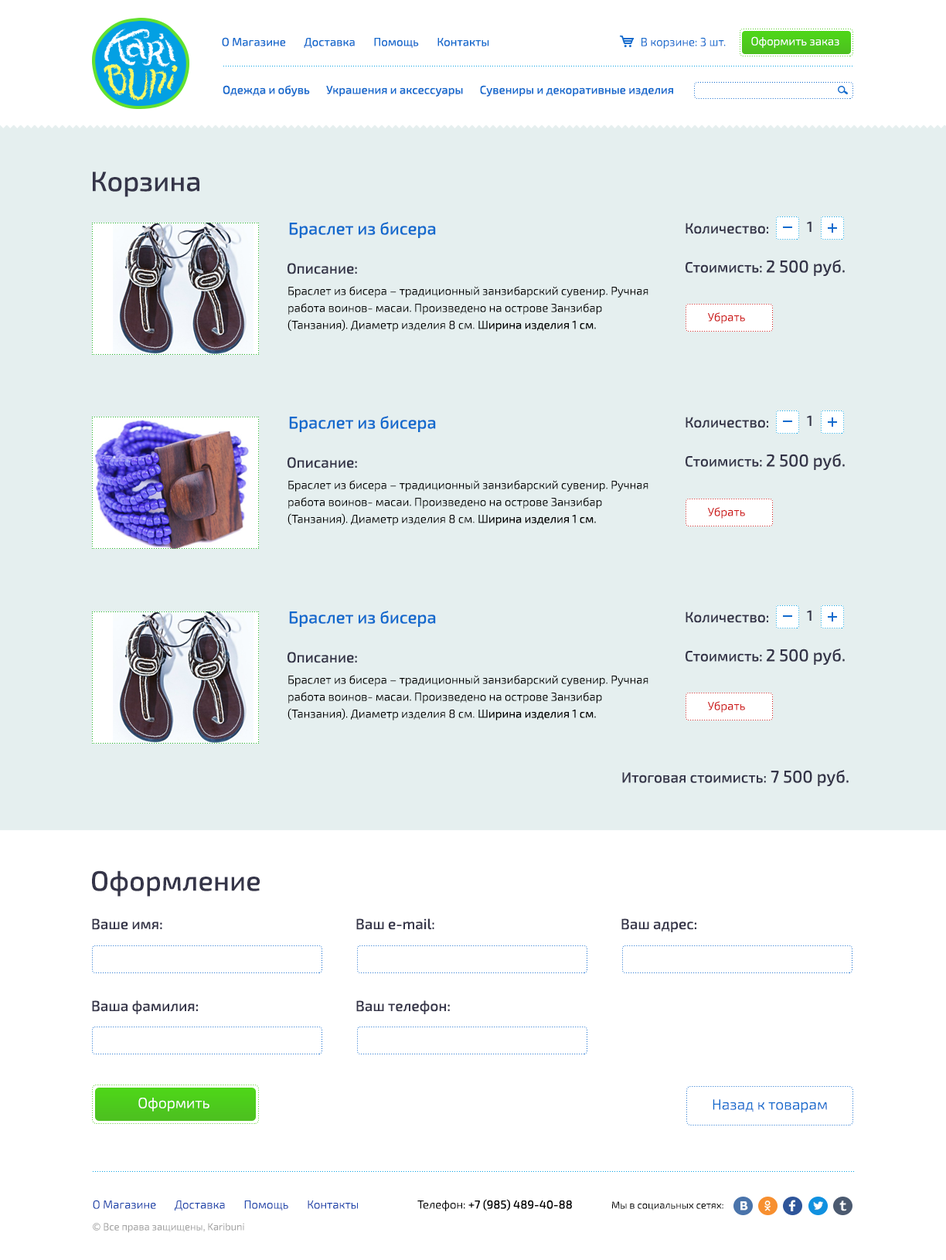
<style>
.page{position:relative;width:946px;height:1260px;background:#ffffff}
.page>*{position:absolute;margin:0}
.t1{font:11.6px "Exo2-Regular";color:#126acd}
.t2{font:11.6px "Exo2-Light";color:#126acd}
.t3{font:11.6px "Exo2-Light";color:#ffffff}
.t4{font:11.6px "Exo2-Medium";color:#126acd}
.t5{font:27.8px "Exo2-Medium";color:#353549}
.t6{font:17px "Exo2-Medium";color:#126acd}
.t7{font:14.7px "Exo2-Medium";color:#353549}
.t8{font:17px "Exo2-Medium";color:#353549}
.t9{font:11.6px/17px "Exo2-Light";color:#000000}
.t10{font:11.6px/17px "Exo2-Regular";color:#000000}
.t11{font:11.6px "Exo2-Light";color:#cd1212}
.t12{font:14.7px "Exo2-Light";color:#ffffff}
.t13{font:14.7px "Exo2-Light";color:#126acd}
.t14{font:11.6px "Exo2-Light";color:#1e45ab}
.t15{font:11.6px "Exo2-Medium";color:#000000}
.t16{font:11.6px "Exo2-Light";color:#000000}
.t17{font:10.1px "Exo2-Light";color:#000000}
.t18{font:10.1px "Exo2-Light";color:#a3a3a3}
</style>
<div class="page">
<p class="t1" style="left:222px;top:37px;width:267px;height:11px">О Магазине       Доставка       Помощь       Контакты</p>
<p class="t2" style="left:642px;top:37px;width:84px;height:12px">В корзине: 3 шт.</p>
<p class="t3" style="left:751px;top:36px;width:89px;height:12px">Оформить заказ</p>
<p class="t4" style="left:223px;top:85px;width:450px;height:12px">Одежда и обувь       Украшения и аксессуары       Сувениры и декоративные изделия</p>
<p class="t5" style="left:93px;top:172px;width:106px;height:25px">Корзина</p>
<p class="t6" style="left:289px;top:222px;width:147px;height:16px">Браслет из бисера</p>
<p class="t7" style="left:807px;top:221px;width:5px;height:11px">1</p>
<p class="t7" style="left:686px;top:223px;width:82px;height:11px">Количество:</p>
<p class="t7" style="left:288px;top:263px;width:69px;height:11px">Описание:</p>
<p class="t7" style="left:686px;top:260px;width:159px;height:16px">Стоимисть: <span class="t8">2 500 руб.</span></p>
<p class="t9" style="left:288px;top:286px;width:361px;height:46px">Браслет из бисера – традиционный занзибарский сувенир. Ручная работа воинов- масаи. Произведено на острове Занзибар (Танзания). Диаметр изделия 8 см. <span class="t10">Ширина изделия 1 см.</span></p>
<p class="t11" style="left:708px;top:312px;width:37px;height:12px">Убрать</p>
<p class="t6" style="left:289px;top:416px;width:147px;height:16px">Браслет из бисера</p>
<p class="t7" style="left:686px;top:417px;width:82px;height:11px">Количество:</p>
<p class="t7" style="left:807px;top:415px;width:5px;height:11px">1</p>
<p class="t7" style="left:288px;top:457px;width:69px;height:11px">Описание:</p>
<p class="t7" style="left:686px;top:454px;width:159px;height:16px">Стоимисть: <span class="t8">2 500 руб.</span></p>
<p class="t9" style="left:288px;top:480px;width:361px;height:46px">Браслет из бисера – традиционный занзибарский сувенир. Ручная работа воинов- масаи. Произведено на острове Занзибар (Танзания). Диаметр изделия 8 см. <span class="t10">Ширина изделия 1 см.</span></p>
<p class="t11" style="left:708px;top:507px;width:37px;height:12px">Убрать</p>
<p class="t6" style="left:289px;top:611px;width:147px;height:16px">Браслет из бисера</p>
<p class="t7" style="left:686px;top:612px;width:82px;height:11px">Количество:</p>
<p class="t7" style="left:807px;top:610px;width:5px;height:11px">1</p>
<p class="t7" style="left:288px;top:652px;width:69px;height:11px">Описание:</p>
<p class="t7" style="left:686px;top:649px;width:159px;height:16px">Стоимисть: <span class="t8">2 500 руб.</span></p>
<p class="t9" style="left:288px;top:675px;width:361px;height:46px">Браслет из бисера – традиционный занзибарский сувенир. Ручная работа воинов- масаи. Произведено на острове Занзибар (Танзания). Диаметр изделия 8 см. <span class="t10">Ширина изделия 1 см.</span></p>
<p class="t11" style="left:708px;top:701px;width:37px;height:12px">Убрать</p>
<p class="t7" style="left:622px;top:770px;width:227px;height:16px">Итоговая стоимисть: <span class="t8">7 500 руб.</span></p>
<p class="t5" style="left:92px;top:871px;width:168px;height:26px">Оформление</p>
<p class="t7" style="left:92px;top:918px;width:70px;height:12px">Ваше имя:</p>
<p class="t7" style="left:356px;top:918px;width:78px;height:12px">Ваш e-mail:</p>
<p class="t7" style="left:622px;top:918px;width:75px;height:14px">Ваш адрес:</p>
<p class="t7" style="left:92px;top:1000px;width:106px;height:14px">Ваша фамилия:</p>
<p class="t7" style="left:356px;top:1000px;width:94px;height:14px">Ваш телефон:</p>
<p class="t12" style="left:138px;top:1098px;width:72px;height:14px">Оформить</p>
<p class="t13" style="left:713px;top:1099px;width:114px;height:14px">Назад к товарам</p>
<p class="t14" style="left:93px;top:1200px;width:265px;height:11px">О Магазине       Доставка       Помощь       Контакты</p>
<p class="t15" style="left:417px;top:1199px;width:155px;height:12px"><span class="t16">Телефон: </span>+7 (985) 489-40-88</p>
<p class="t17" style="left:612px;top:1201px;width:112px;height:10px">Мы в социальных сетях:</p>
<p class="t18" style="left:93px;top:1223px;width:151px;height:10px">© Все права защищены, Karibuni</p>
</div>
